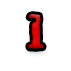
<style>
.page{position:relative;width:71px;height:71px;background:#ffffff}
.page>*{position:absolute;margin:0}
.t1{font:55px "Tipi-Organic"}
</style>
<div class="page">
<p class="t1" style="left:28px;top:14px;width:16px;height:35px">1</p>
</div>
